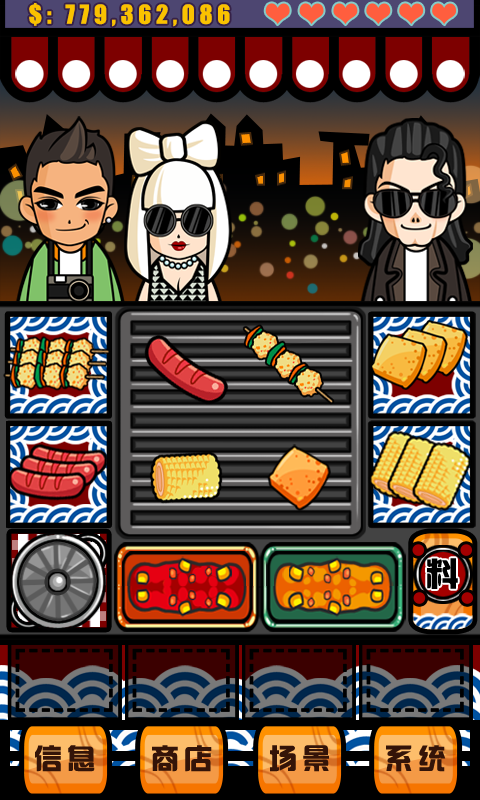
<style>
.page{position:relative;width:480px;height:800px}
.page>*{position:absolute;margin:0}
.t1{font:24.1px "Impact";letter-spacing:0.2em;color:#fac200}
.t2{font:32.8px "hzgb";letter-spacing:0.2em;color:#000000}
.t3{font:27.8px "hzgb";letter-spacing:0.2em;color:#341408}
</style>
<div class="page">
<p class="t1" style="left:29px;top:3px;width:201px;height:24px">$: 779,362,086</p>
<p class="t2" style="left:427px;top:558px;width:31px;height:31px">料</p>
<p class="t3" style="left:35px;top:745px;width:60px;height:27px">信息</p>
<p class="t3" style="left:152px;top:745px;width:60px;height:27px">商店</p>
<p class="t3" style="left:270px;top:745px;width:59px;height:27px">场景</p>
<p class="t3" style="left:386px;top:745px;width:60px;height:27px">系统</p>
</div>
